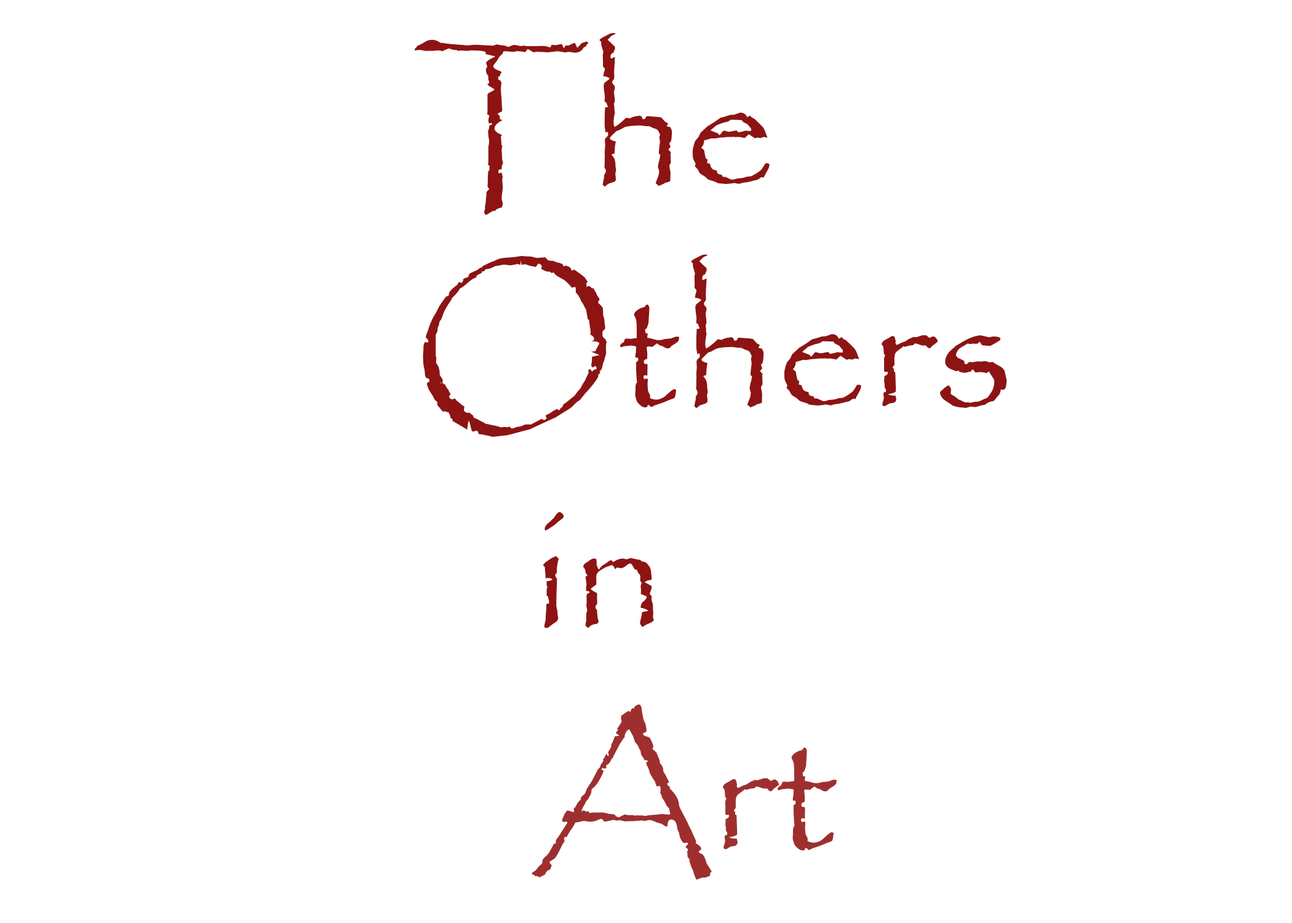
<style>
.page{position:relative;width:1292px;height:923px;background:#ffffff}
.page>*{position:absolute;margin:0}
.t1{font:184.6px "Papyrus-Regular";color:#8e1313}
.t2{font:184.6px "Papyrus-Regular";color:#9f2f2f}
</style>
<div class="page">
<p class="t1" style="left:414px;top:33px;width:593px;height:847px">The <br>Others<br>   in<br><span class="t2">   Art</span></p>
</div>
